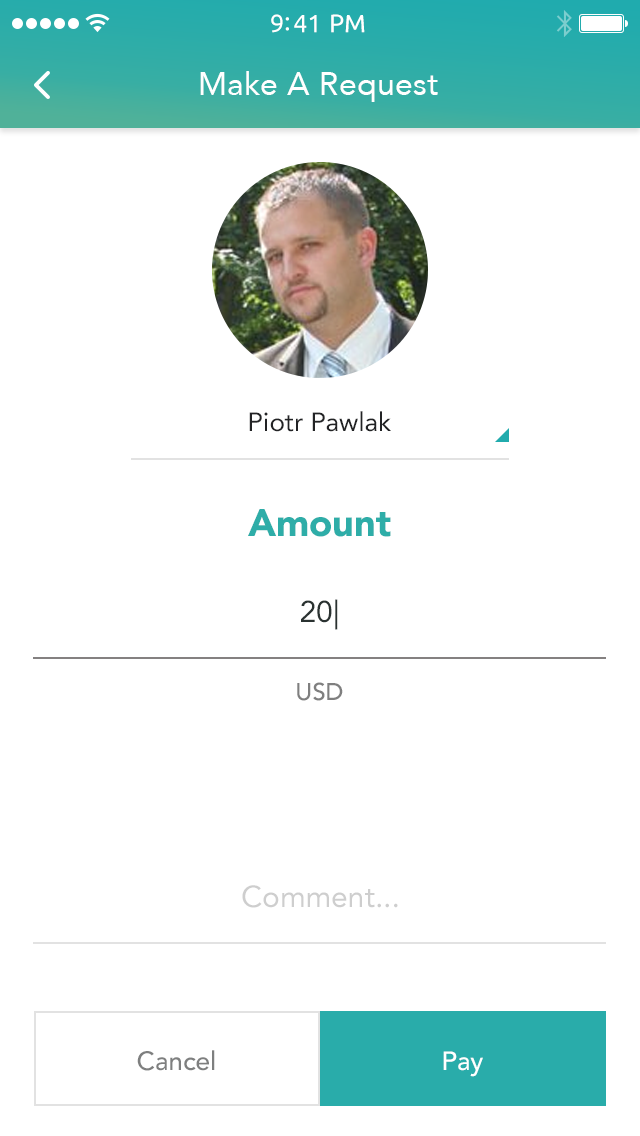
<style>
.page{position:relative;width:640px;height:1136px;background:#ffffff}
.page>*{position:absolute;margin:0}
.t1{font:25px "Ubuntu";color:#ffffff}
.t2{font:32px "Avenir-Roman";color:#ffffff}
.t3{font:26px "Avenir-Roman";color:#222325}
.t4{font:38px "Avenir-Black";color:#2eada8}
.t5{font:30px/30px "Avenir-Roman";color:#2a3231}
.t6{font:24px/78px "Avenir-Medium";color:#7f7f7f}
.t7{font:30px "Avenir-Roman";color:#cecece}
.t8{font:26px "Avenir-Medium";color:#7e7f7f}
.t9{font:26px "Avenir-Medium";color:#ffffff}
</style>
<div class="page">
<p class="t1" style="left:271px;top:14px;width:94px;height:19px">9:41 PM</p>
<p class="t2" style="left:200px;top:71px;width:238px;height:31px">Make A Request</p>
<p class="t3" style="left:249px;top:411px;width:142px;height:21px">Piotr Pawlak</p>
<p class="t4" style="left:248px;top:509px;width:143px;height:28px">Amount</p>
<p class="t5" style="left:297px;top:599px;width:46px;height:102px;text-align:center">20|<br><span class="t6">USD</span></p>
<p class="t7" style="left:242px;top:885px;width:156px;height:23px">Comment...</p>
<p class="t8" style="left:137px;top:1050px;width:78px;height:21px">Cancel</p>
<p class="t9" style="left:443px;top:1051px;width:40px;height:26px">Pay</p>
</div>
